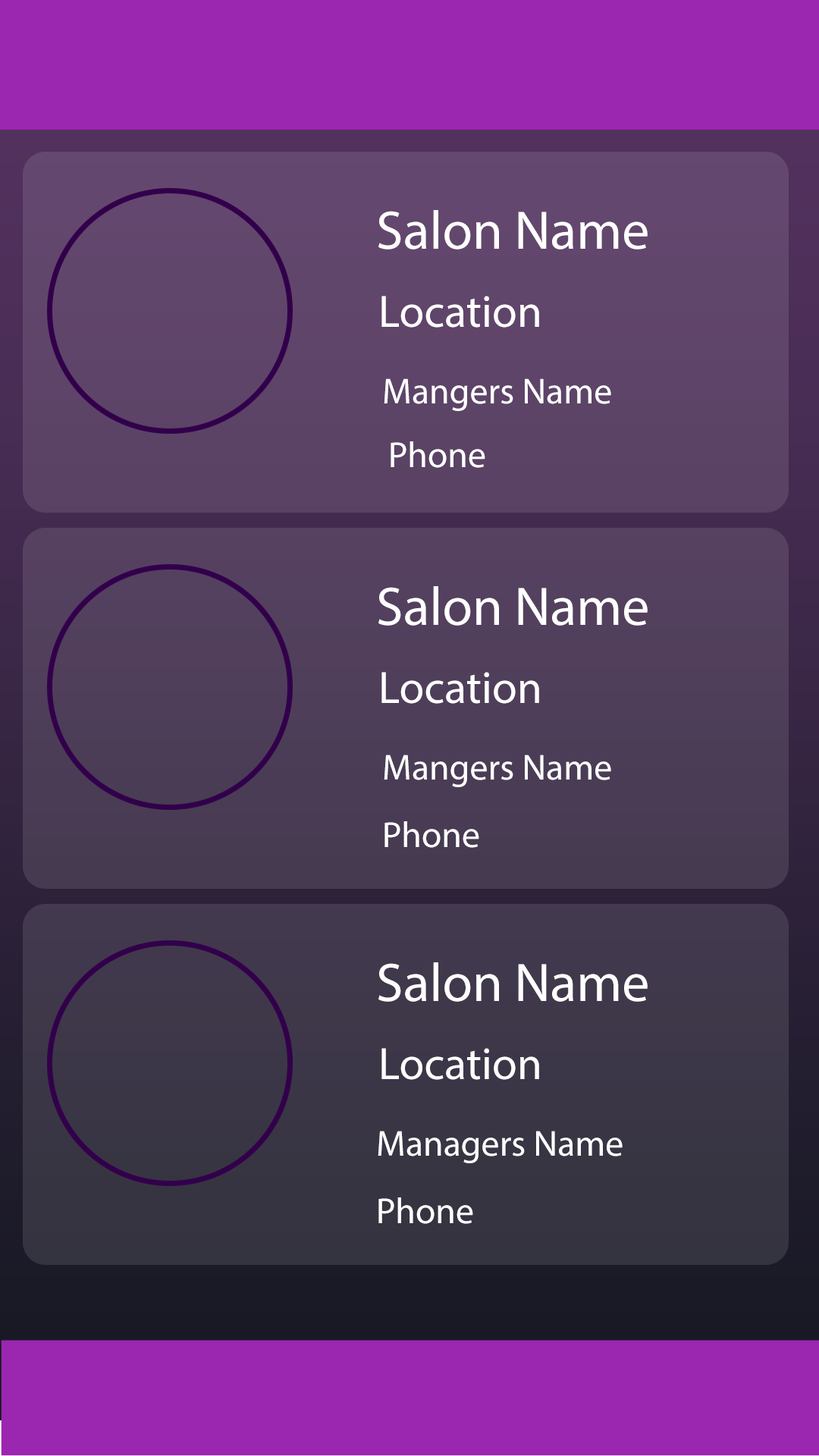
<style>
.page{position:relative;width:819px;height:1456px}
.page>*{position:absolute;margin:0}
.t1{font:54.6px "MyriadPro-Regular";color:#ffffff}
.t2{font:45.5px "MyriadPro-Regular";color:#ffffff}
.t3{font:36.4px "MyriadPro-Regular";color:#ffffff}
</style>
<div class="page">
<p class="t1" style="left:378px;top:210px;width:270px;height:39px">Salon Name</p>
<p class="t2" style="left:381px;top:296px;width:158px;height:32px">Location</p>
<p class="t3" style="left:384px;top:378px;width:227px;height:33px">Mangers Name</p>
<p class="t3" style="left:391px;top:441px;width:94px;height:27px">Phone</p>
<p class="t1" style="left:378px;top:586px;width:270px;height:40px">Salon Name</p>
<p class="t2" style="left:381px;top:672px;width:158px;height:32px">Location</p>
<p class="t3" style="left:384px;top:755px;width:227px;height:32px">Mangers Name</p>
<p class="t3" style="left:384px;top:821px;width:95px;height:27px">Phone</p>
<p class="t1" style="left:378px;top:962px;width:270px;height:40px">Salon Name</p>
<p class="t2" style="left:381px;top:1048px;width:158px;height:32px">Location</p>
<p class="t3" style="left:378px;top:1131px;width:245px;height:32px">Managers Name</p>
<p class="t3" style="left:378px;top:1197px;width:95px;height:27px">Phone</p>
</div>
